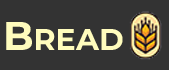
<style>
.page{position:relative;width:169px;height:70px;background:#333333}
.page>*{position:absolute;margin:0}
.t1{font:30px "Montserrat-Bold";color:#fffcbd;text-transform:uppercase}
.t2{font:40px "Montserrat-Bold";color:#fffcbd;text-transform:uppercase}
</style>
<div class="page">
<p class="t1" style="left:6px;top:22px;width:117px;height:28px"><span class="t2">B</span>read</p>
</div>
